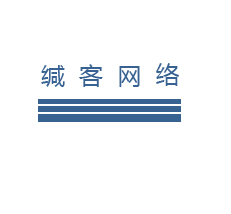
<style>
.page{position:relative;width:231px;height:214px;background:#ffffff}
.page>*{position:absolute;margin:0}
.t1{font:24px "MicrosoftYaHei";color:#386292}
</style>
<div class="page">
<p class="t1" style="left:41px;top:63px;width:138px;height:24px">缄  客  网  络</p>
</div>
